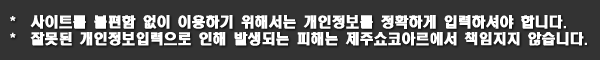
<style>
.page{position:relative;width:600px;height:60px;background:#333333}
.page>*{position:absolute;margin:0}
.t1{font:14px "HeadlineR-HM";color:#ffffff}
</style>
<div class="page">
<p class="t1" style="left:10px;top:15px;width:577px;height:31px">*  사이트를 불편함 없이 이용하기 위해서는 개인정보를 정확하게 입력하셔야 합니다.<br>*  잘못된 개인정보입력으로 인해 발생되는 피해는 제주쇼코아르에서 책임지지 않습니다.</p>
</div>
